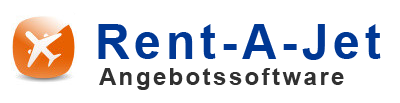
<style>
.page{position:relative;width:400px;height:103px;background:#ffffff}
.page>*{position:absolute;margin:0}
.t1{font:48px "Arial-BoldMT";letter-spacing:0.1em;color:#013894}
.t2{font:24px "Arial-BoldMT";letter-spacing:0.1em;color:#323232}
</style>
<div class="page">
<p class="t1" style="left:98px;top:24px;width:283px;height:36px">Rent-A-Jet</p>
<p class="t2" style="left:99px;top:68px;width:245px;height:22px">Angebotssoftware</p>
</div>
